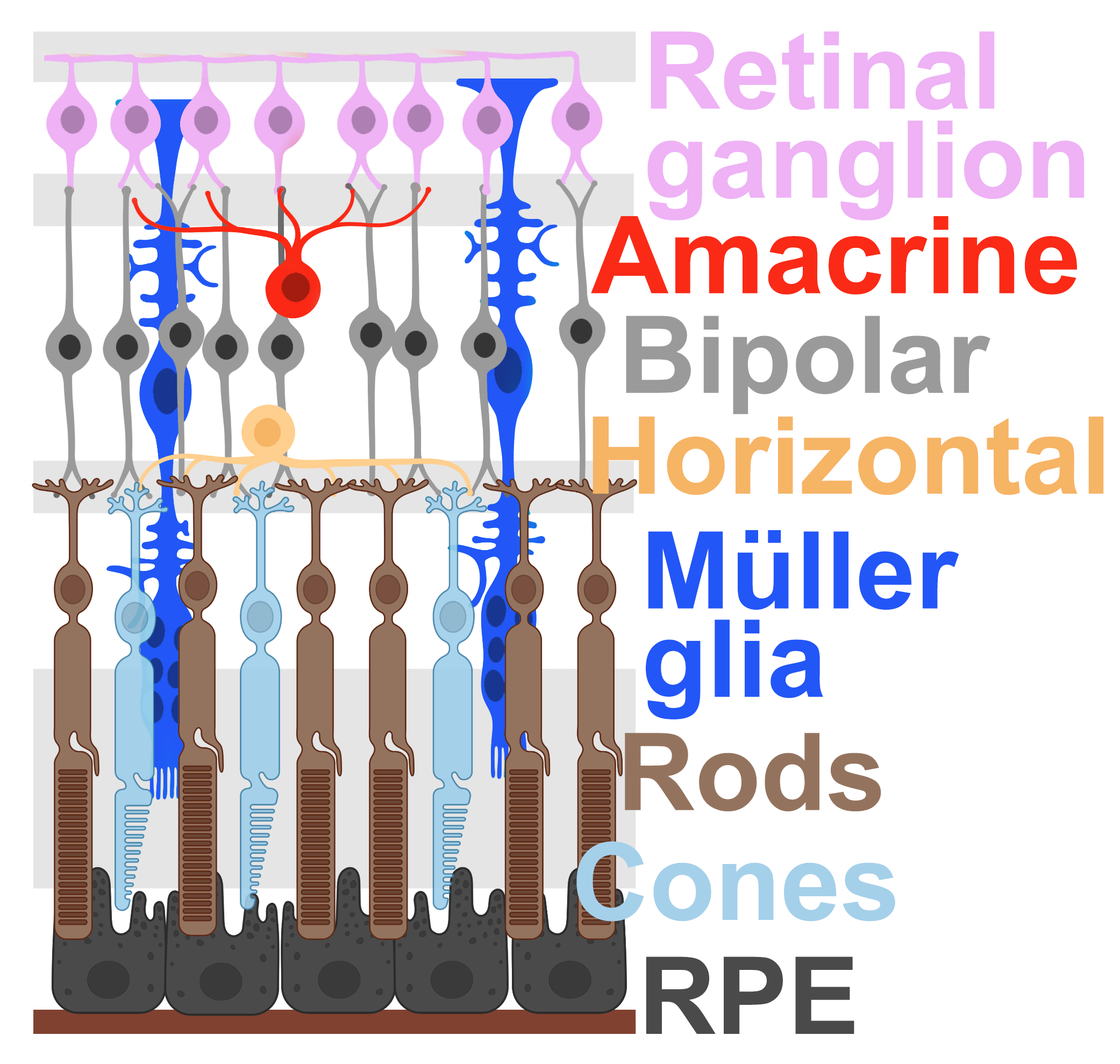
<style>
.page{position:relative;width:1120px;height:1064px;background:#ffffff}
.page>*{position:absolute;margin:0}
.t1{font:107.6px "Arial-BoldMT";color:#eeb2f5}
.t2{font:107.6px "Arial-BoldMT";color:#fa2a16}
.t3{font:107.6px "Arial-BoldMT";color:#9a9a9a}
.t4{font:107.6px "Arial-BoldMT";color:#f6b465}
.t5{font:107.6px "Arial-BoldMT";color:#2256f7}
.t6{font:107.6px "Arial-BoldMT";color:#94735e}
.t7{font:107.6px "Arial-BoldMT";color:#a5d0ea}
.t8{font:107.6px "Arial-BoldMT";color:#4a4a4a}
</style>
<div class="page">
<p class="t1" style="left:651px;top:31px;width:344px;height:79px">Retinal</p>
<p class="t1" style="left:648px;top:120px;width:437px;height:101px">ganglion</p>
<p class="t2" style="left:591px;top:216px;width:486px;height:79px">Amacrine</p>
<p class="t3" style="left:626px;top:316px;width:365px;height:99px">Bipolar</p>
<p class="t4" style="left:593px;top:416px;width:511px;height:79px">Horizontal</p>
<p class="t5" style="left:648px;top:530px;width:311px;height:80px">Müller</p>
<p class="t5" style="left:646px;top:620px;width:177px;height:100px">glia</p>
<p class="t6" style="left:625px;top:733px;width:257px;height:79px">Rods</p>
<p class="t7" style="left:577px;top:842px;width:318px;height:80px">Cones</p>
<p class="t8" style="left:646px;top:957px;width:209px;height:77px">RPE</p>
</div>
